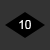
<style>
.page{position:relative;width:50px;height:50px;background:#333333}
.page>*{position:absolute;margin:0}
.t1{font:12px "ArialMT";color:#ffffff}
</style>
<div class="page">
<p class="t1" style="left:19px;top:20px;width:12px;height:9px">10</p>
</div>
